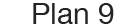
<style>
.page{position:relative;width:140px;height:28px;background:#ffffff}
.page>*{position:absolute;margin:0}
.t1{font:30px "HelveticaNeue";color:#242424}
</style>
<div class="page">
<p class="t1" style="left:33px;top:3px;width:81px;height:21px">Plan 9</p>
</div>
